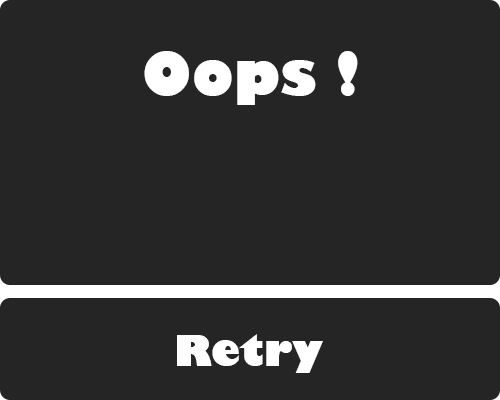
<style>
.page{position:relative;width:500px;height:400px;background:#252525}
.page>*{position:absolute;margin:0}
.t1{font:58.3px "GillSans-UltraBold";color:#ffffff}
.t2{font:41.7px "GillSans-UltraBold";color:#ffffff}
</style>
<div class="page">
<p class="t1" style="left:144px;top:51px;width:214px;height:54px">Oops !</p>
<p class="t2" style="left:177px;top:334px;width:146px;height:39px">Retry</p>
</div>
